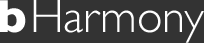
<style>
.page{position:relative;width:204px;height:43px;background:#333333}
.page>*{position:absolute;margin:0}
.t1{font:47px "GillSans-Bold";color:#ffffff}
.t2{font:47px "GillSans-Light";color:#ffffff}
</style>
<div class="page">
<p class="t1" style="left:0px;top:0px;width:26px;height:33px">b</p>
<p class="t2" style="left:33px;top:0px;width:171px;height:43px">Harmony</p>
</div>
